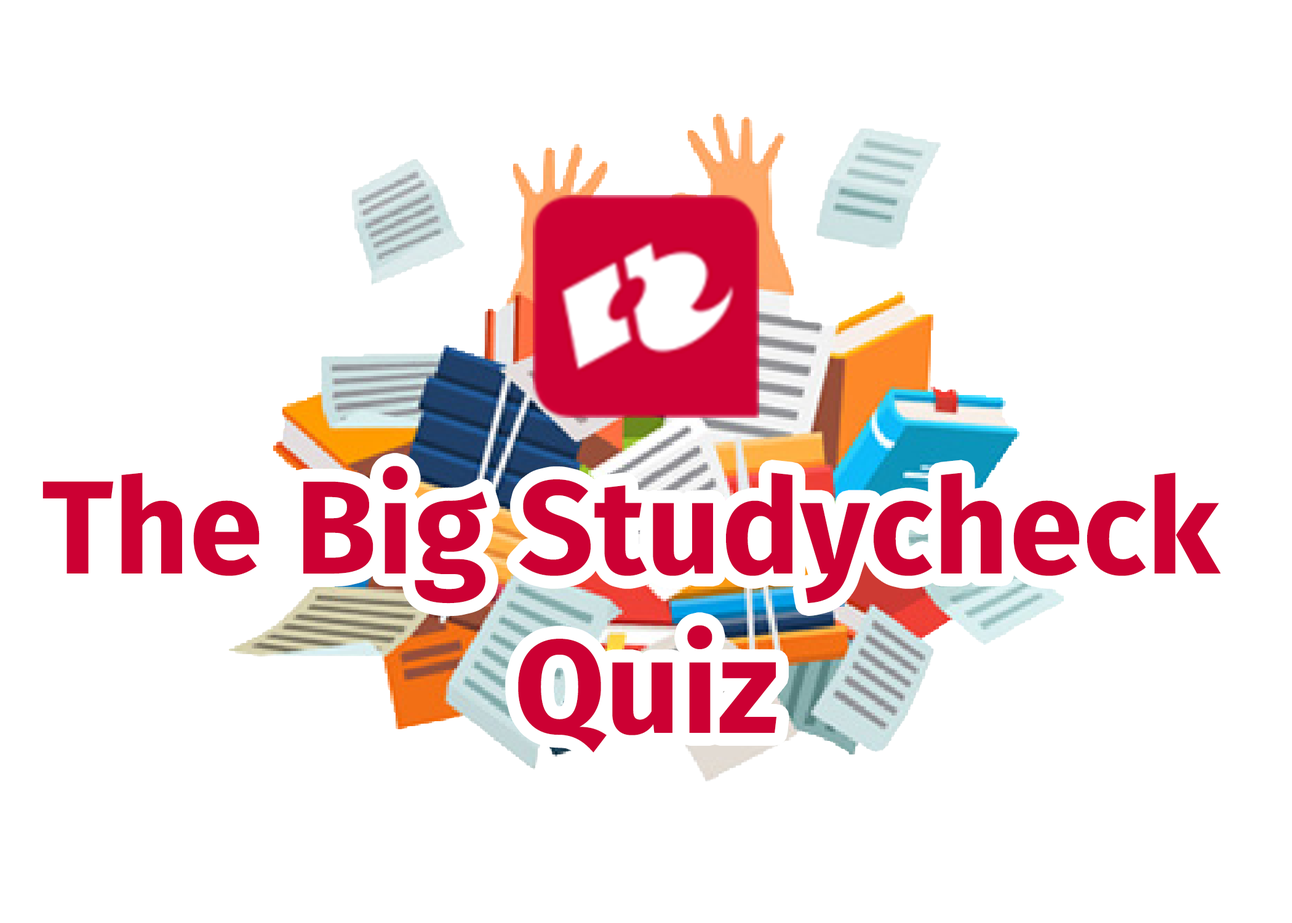
<style>
.page{position:relative;width:1292px;height:923px;background:#ffffff}
.page>*{position:absolute;margin:0}
.t1{font:132.6px "FiraSans-Bold";color:#cc0033}
</style>
<div class="page">
<p class="t1" style="left:42px;top:466px;width:1179px;height:286px;text-align:center">The Big Studycheck <br>Quiz</p>
</div>
